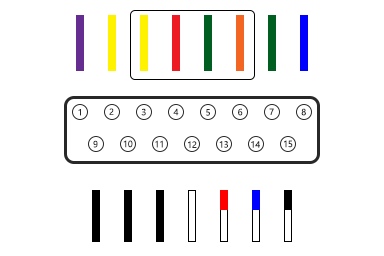
<style>
.page{position:relative;width:384px;height:256px;background:#ffffff}
.page>*{position:absolute;margin:0}
.t1{font:9px "SegoeUI";color:#282828}
.t2{font:9px "SegoeUI";color:#3e3e3e}
.t3{font:9px "SegoeUI"}
</style>
<div class="page">
<p class="t1" style="left:78px;top:109px;width:3px;height:7px">1</p>
<p class="t1" style="left:109px;top:108px;width:5px;height:7px">2</p>
<p class="t1" style="left:141px;top:108px;width:5px;height:8px">3</p>
<p class="t2" style="left:173px;top:108px;width:6px;height:8px">4</p>
<p class="t1" style="left:206px;top:109px;width:4px;height:7px">5</p>
<p class="t1" style="left:238px;top:108px;width:5px;height:8px">6</p>
<p class="t2" style="left:269px;top:108px;width:5px;height:7px">7</p>
<p class="t1" style="left:301px;top:108px;width:5px;height:8px">8</p>
<p class="t1" style="left:93px;top:140px;width:5px;height:8px">9</p>
<p class="t1" style="left:123px;top:140px;width:10px;height:8px">10</p>
<p class="t3" style="left:155px;top:140px;width:8px;height:8px">11</p>
<p class="t1" style="left:188px;top:141px;width:9px;height:7px">12</p>
<p class="t1" style="left:219px;top:141px;width:9px;height:7px">13</p>
<p class="t1" style="left:251px;top:141px;width:9px;height:7px">14</p>
<p class="t1" style="left:284px;top:140px;width:9px;height:8px">15</p>
</div>
